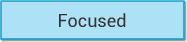
<style>
.page{position:relative;width:187px;height:42px;background:#ade1f5}
.page>*{position:absolute;margin:0}
.t1{font:18px "Roboto-Regular";color:#333333}
</style>
<div class="page">
<p class="t1" style="left:59px;top:13px;width:67px;height:15px">Focused</p>
</div>
